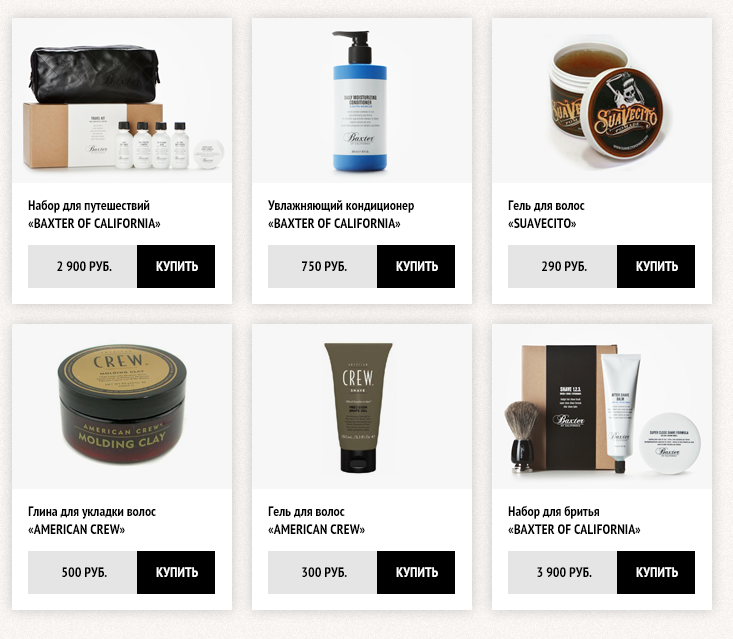
<style>
.page{position:relative;width:733px;height:639px;background:#f7f7f7}
.page>*{position:absolute;margin:0}
.t1{font:14px/18px "PTSans-NarrowBold";color:#000000;text-transform:uppercase}
.t2{font:14px/18px "PTSans-NarrowBold";color:#000000}
.t3{font:14px "PTSans-NarrowBold";color:#000000;text-transform:uppercase}
.t4{font:14px "PTSans-NarrowBold";color:#ffffff;text-transform:uppercase}
</style>
<div class="page">
<p class="t1" style="left:28px;top:199px;width:133px;height:29px">Н<span class="t2">абор для путешествий <br></span>«Baxter of California»</p>
<p class="t2" style="left:267px;top:200px;width:147px;height:28px"><span class="t1">У</span>влажняющий кондиционер<span class="t1"> <br>«Baxter of California»</span></p>
<p class="t2" style="left:508px;top:200px;width:77px;height:28px"><span class="t1">Г</span>ель для волос<br><span class="t1">«SUAVECITO»</span></p>
<p class="t3" style="left:57px;top:261px;width:55px;height:10px">2 900 РУБ.</p>
<p class="t4" style="left:156px;top:261px;width:42px;height:10px">КУПИТЬ</p>
<p class="t3" style="left:302px;top:261px;width:45px;height:10px">750 РУБ.</p>
<p class="t4" style="left:396px;top:261px;width:42px;height:10px">КУПИТЬ</p>
<p class="t3" style="left:542px;top:261px;width:45px;height:10px">290 РУБ.</p>
<p class="t4" style="left:636px;top:261px;width:42px;height:10px">КУПИТЬ</p>
<p class="t2" style="left:28px;top:506px;width:128px;height:28px"><span class="t1">Г</span>лина для укладки волос <br><span class="t1">«American crew»</span></p>
<p class="t1" style="left:268px;top:506px;width:97px;height:28px">Г<span class="t2">ель для волос<br></span>«AMERICAN CREW»</p>
<p class="t1" style="left:508px;top:505px;width:133px;height:29px">Н<span class="t2">абор для бритья<br></span>«Baxter of California»</p>
<p class="t3" style="left:62px;top:567px;width:45px;height:10px">500 РУБ.</p>
<p class="t4" style="left:156px;top:567px;width:42px;height:10px">КУПИТЬ</p>
<p class="t3" style="left:302px;top:567px;width:45px;height:10px">300 РУБ.</p>
<p class="t4" style="left:396px;top:567px;width:42px;height:10px">КУПИТЬ</p>
<p class="t3" style="left:537px;top:567px;width:55px;height:10px">3 900 РУБ.</p>
<p class="t4" style="left:636px;top:567px;width:42px;height:10px">КУПИТЬ</p>
</div>
